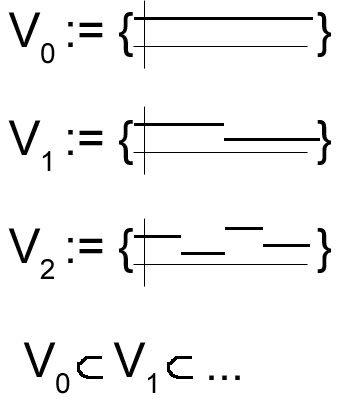
<style>
.page{position:relative;width:344px;height:406px;background:#ffffff}
.page>*{position:absolute;margin:0}
.t1{font:48px/18px "ArialMT";color:#000000}
.t2{font:48px "ArialMT";color:#000000}
</style>
<div class="page">
<p class="t1" style="left:8px;top:12px;width:323px;height:267px">V0 := {              }<br><br><br><br><br><br>V1 := {              }<br><br><br><br><br><br>V2 := {              }</p>
<p class="t2" style="left:23px;top:342px;width:47px;height:52px">V0</p>
<p class="t2" style="left:113px;top:342px;width:43px;height:51px">V1</p>
<p class="t2" style="left:209px;top:375px;width:31px;height:5px">...</p>
</div>
